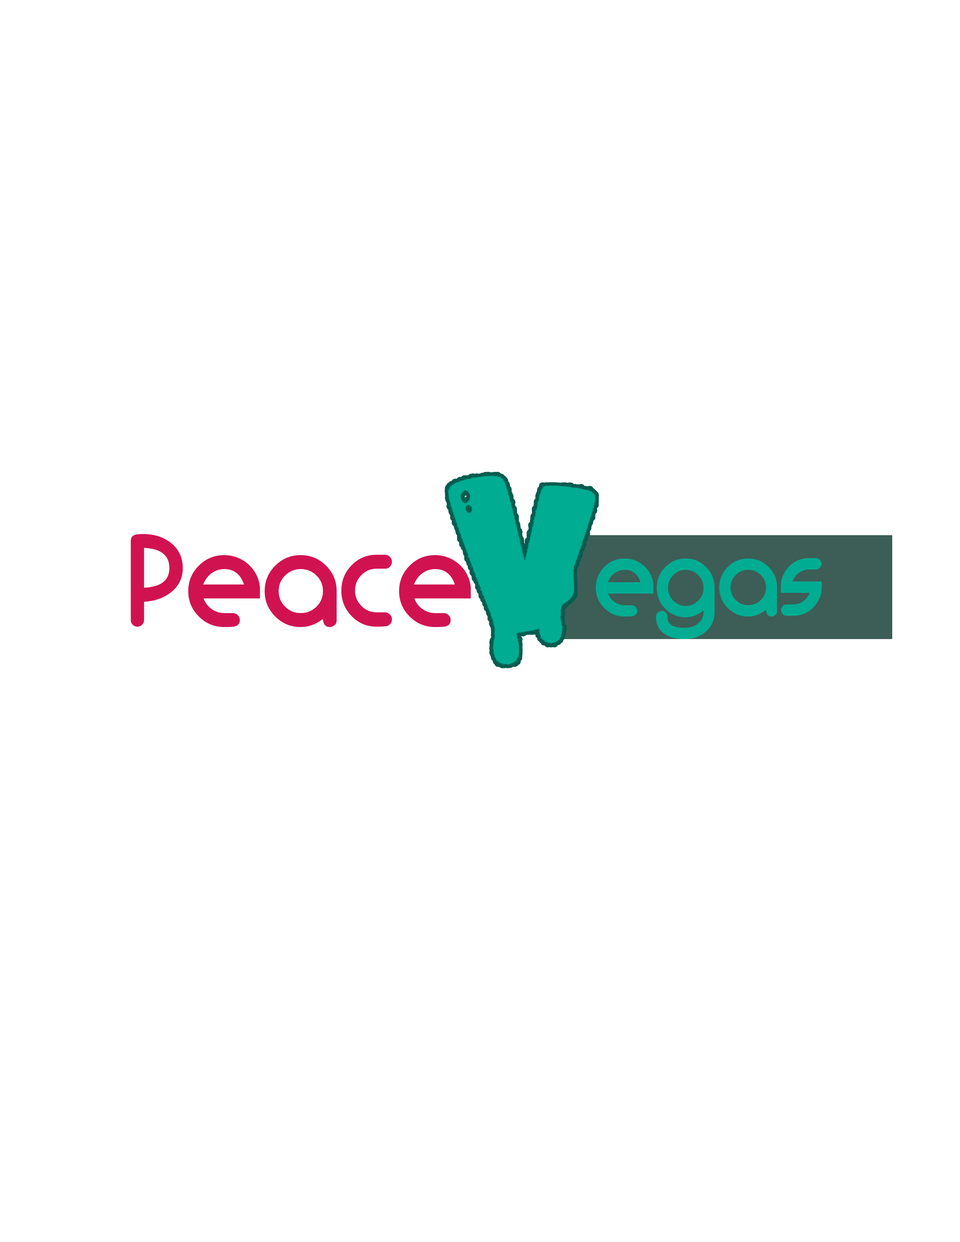
<style>
.page{position:relative;width:960px;height:1242px;background:#ffffff}
.page>*{position:absolute;margin:0}
.t1{font:140.8px "MonoglycerideDemiBold";color:#d11251}
.t2{font:112.9px "MonoglycerideDemiBold";color:#00ac92}
</style>
<div class="page">
<p class="t1" style="left:131px;top:534px;width:340px;height:93px">Peace</p>
<p class="t2" style="left:596px;top:558px;width:226px;height:81px">egas</p>
</div>
